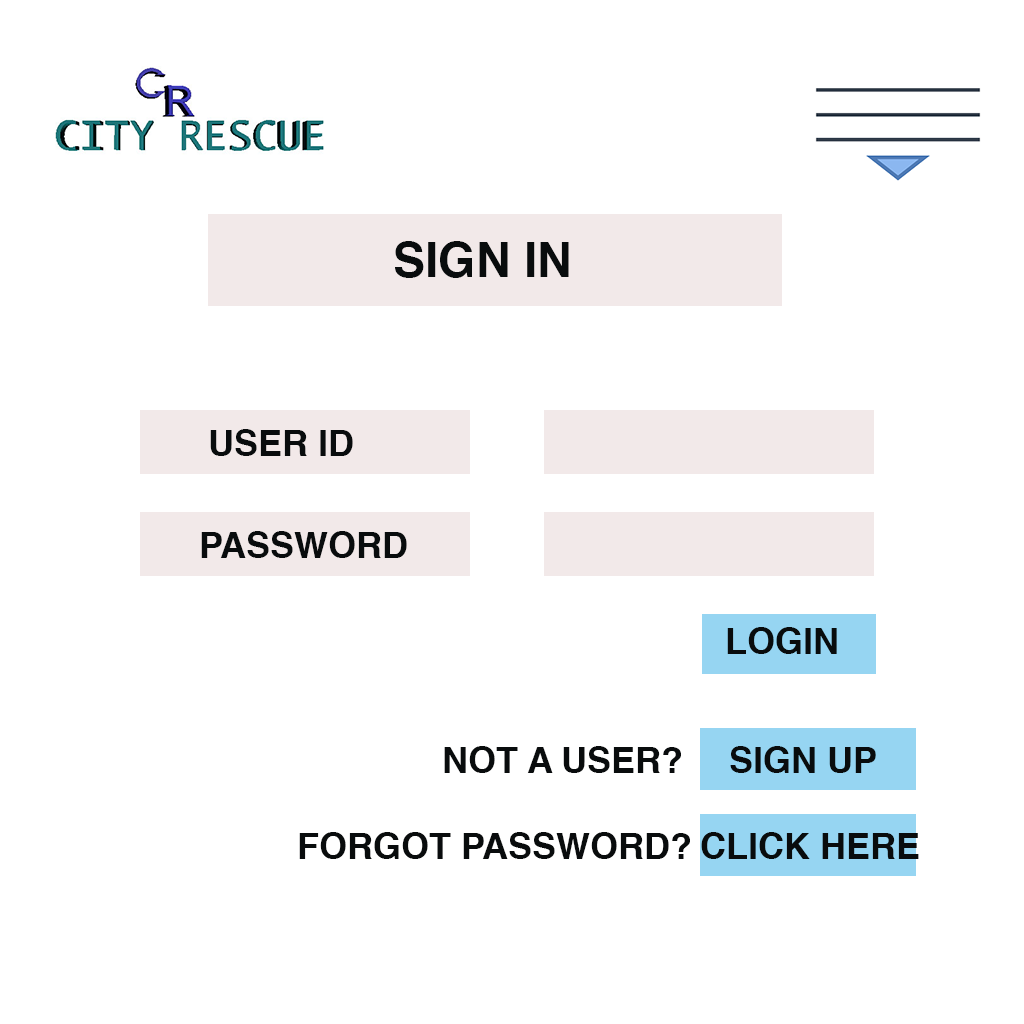
<style>
.page{position:relative;width:1024px;height:1024px;background:#ffffff}
.page>*{position:absolute;margin:0}
.t1{font:48px "Helvetica-Bold";color:#090c0d;text-transform:uppercase}
.t2{font:36px "Helvetica-Bold";color:#090c0d;text-transform:uppercase}
</style>
<div class="page">
<p class="t1" style="left:395px;top:241px;width:174px;height:37px">sign in</p>
<p class="t2" style="left:210px;top:429px;width:143px;height:27px">user id</p>
<p class="t2" style="left:201px;top:531px;width:206px;height:27px">password</p>
<p class="t2" style="left:727px;top:627px;width:110px;height:27px">login</p>
<p class="t2" style="left:444px;top:746px;width:237px;height:27px">not a user?</p>
<p class="t2" style="left:730px;top:746px;width:146px;height:27px">sign up</p>
<p class="t2" style="left:299px;top:832px;width:391px;height:27px">forgot password?</p>
<p class="t2" style="left:701px;top:832px;width:218px;height:27px">click here</p>
</div>
